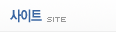
<style>
.page{position:relative;width:116px;height:32px}
.page>*{position:absolute;margin:0}
.t1{font:14px "YGO550";letter-spacing:-0.075em;color:#3a66a2;scale:0.9 1}
.t2{font:8px "Kroeger0553";color:#999999;text-transform:uppercase}
</style>
<div class="page">
<p class="t1" style="left:10px;top:9px;width:32px;height:14px">사이트</p>
<p class="t2" style="left:47px;top:17px;width:19px;height:5px">site</p>
</div>
